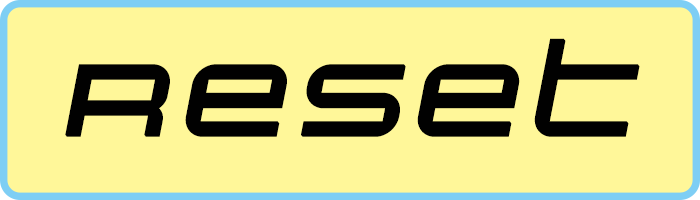
<style>
.page{position:relative;width:700px;height:200px;background:#fff799}
.page>*{position:absolute;margin:0}
.t1{font:125px "ChangelingNeo";letter-spacing:0.1em;color:#010101;font-weight:bold;font-style:italic}
</style>
<div class="page">
<p class="t1" style="left:65px;top:38px;width:575px;height:99px">Reset</p>
</div>
